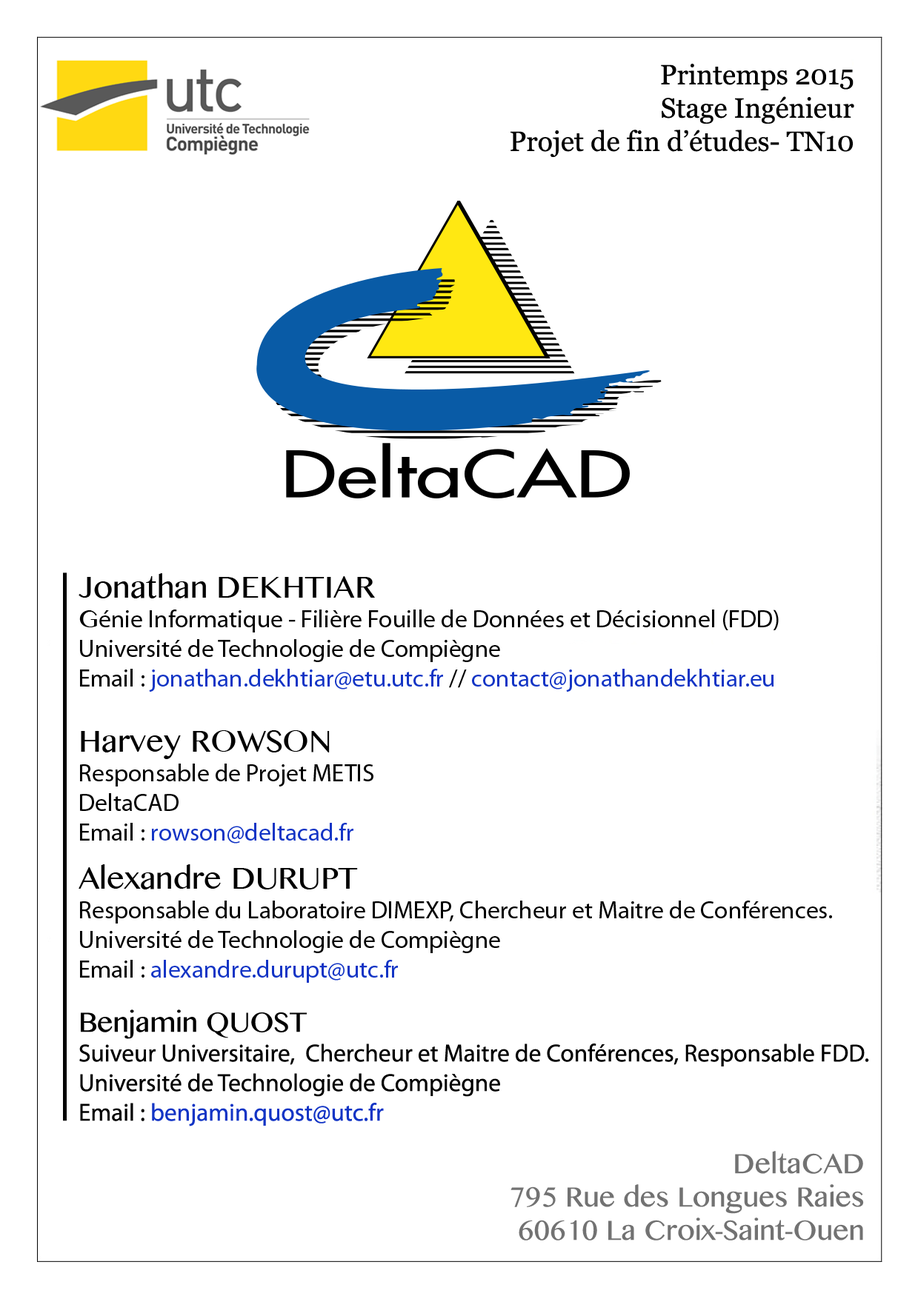
<style>
.page{position:relative;width:918px;height:1299px;background:#ffffff}
.page>*{position:absolute;margin:0}
.t1{font:27.8px "Georgia";color:#000000}
.t2{font:24.7px "MyriadPro-Regular";color:#000000}
.t3{font:30.9px "BanglaMN";color:#000000}
.t4{font:24.7px "BanglaMN";color:#000000}
.t5{font:24.7px "MyriadPro-Regular";color:#1234c5}
.t6{font:27.8px "BanglaMN";color:#000000}
.t7{font:27.8px "BanglaMN";color:#727272}
</style>
<div class="page">
<p class="t1" style="left:510px;top:64px;width:344px;height:93px;text-align:right">Printemps 2015<br>Stage Ingénieur<br>Projet de fin d’études- TN10</p>
<p class="t2" style="left:79px;top:573px;width:700px;height:119px"><span class="t3">Jonathan DEKHTIAR<br></span><span class="t4">G</span>énie Informatique - Filière Fouille de Données et Décisionnel (FDD)<br>Université de Technologie de Compiègne<br>Email : <span class="t5">jonathan.dekhtiar@etu.utc.fr </span>//<span class="t5"> contact@jonathandekhtiar.eu</span></p>
<p class="t2" style="left:80px;top:730px;width:293px;height:114px"><span class="t3">Harvey ROWSON<br></span>Responsable de Projet METIS<br>DeltaCAD<br>Email : <span class="t5">rowson@deltacad.fr</span></p>
<p class="t2" style="left:79px;top:864px;width:753px;height:119px"><span class="t3">Alexandre DURUPT<br></span>Responsable du Laboratoire DIMEXP, Chercheur et Maitre de Conférences.<br>Université de Technologie de Compiègne<br>Email : <span class="t5">alexandre.durupt@utc.fr</span></p>
<p class="t2" style="left:79px;top:1010px;width:790px;height:117px"><span class="t6">Benjamin QUOST<br></span>Suiveur Universitaire,  Chercheur et Maitre de Conférences, Responsable FDD.<br>Université de Technologie de Compiègne<br>Email : <span class="t5">benjamin.quost@utc.fr</span></p>
<p class="t7" style="left:510px;top:1151px;width:354px;height:90px;text-align:right">DeltaCAD<br>795 Rue des Longues Raies<br>60610 La Croix-Saint-Ouen</p>
</div>
